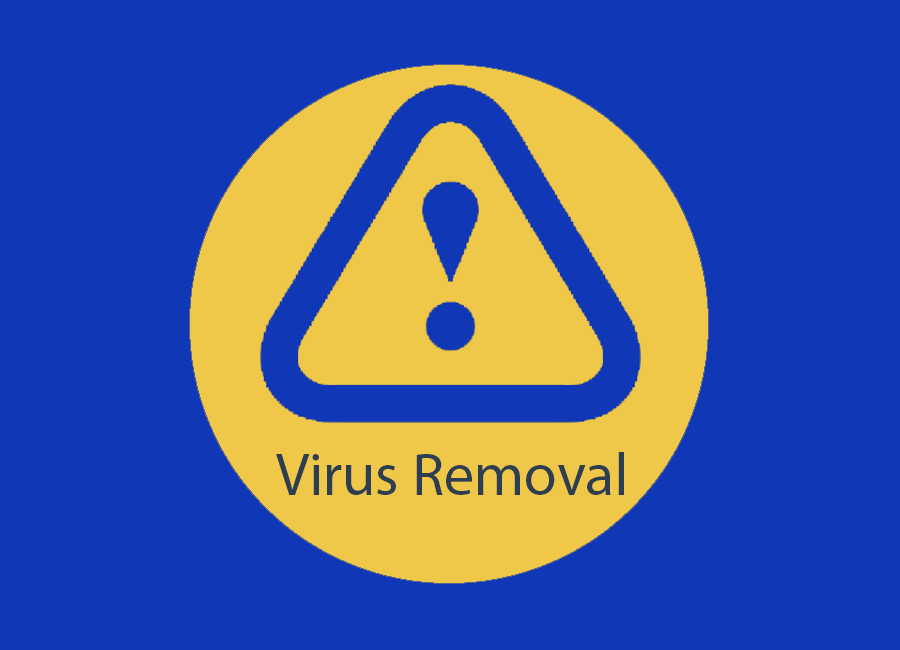
<style>
.page{position:relative;width:900px;height:650px;background:#1037b5}
.page>*{position:absolute;margin:0}
.t1{font:60px "MyriadPro-Regular";color:#2c3e50}
</style>
<div class="page">
<p class="t1" style="left:276px;top:452px;width:348px;height:43px">Virus Removal</p>
</div>
